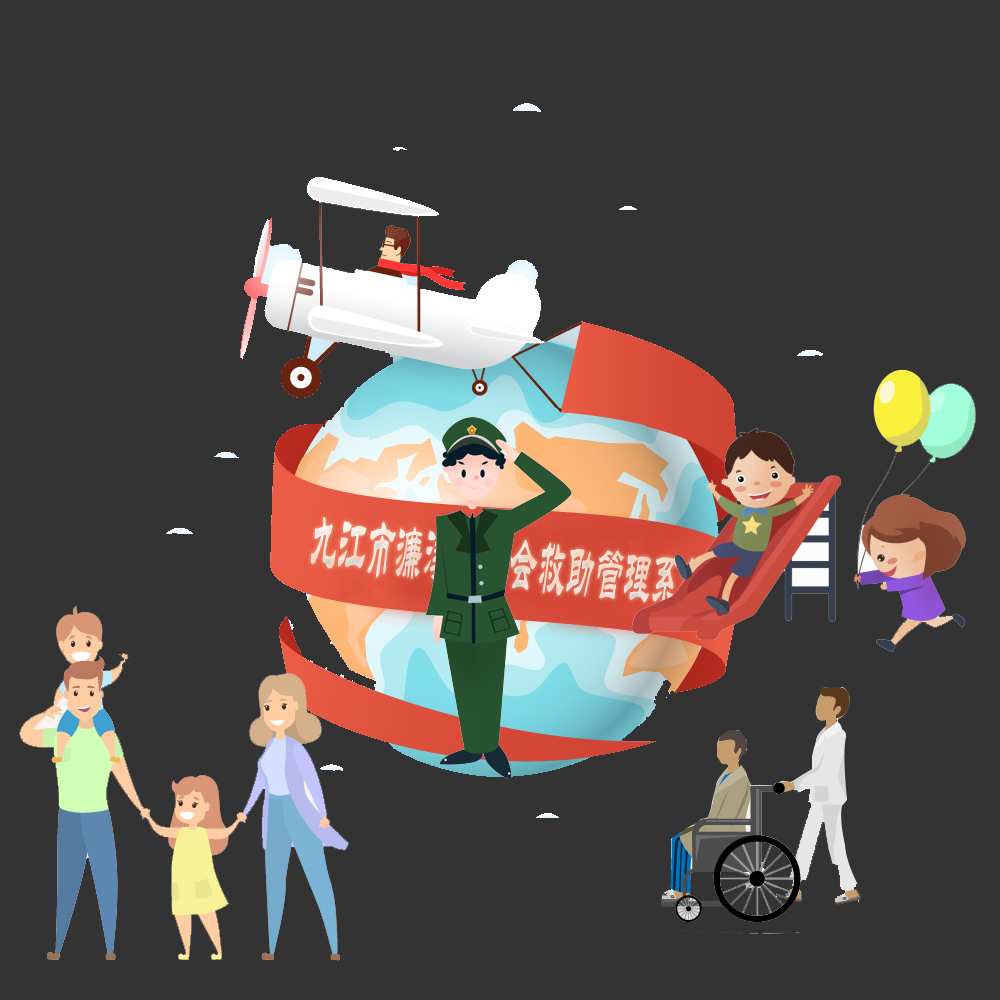
<style>
.page{position:relative;width:1000px;height:1000px;background:#333333}
.page>*{position:absolute;margin:0}
.t1{font:74.3px "STLiti";letter-spacing:0.02em;scale:0.38 1}
</style>
<div class="page">
<p class="t1" style="left:311px;top:517px;width:397px;height:94px;rotate:6deg">九江市濂溪区社会救助管理系统</p>
</div>
